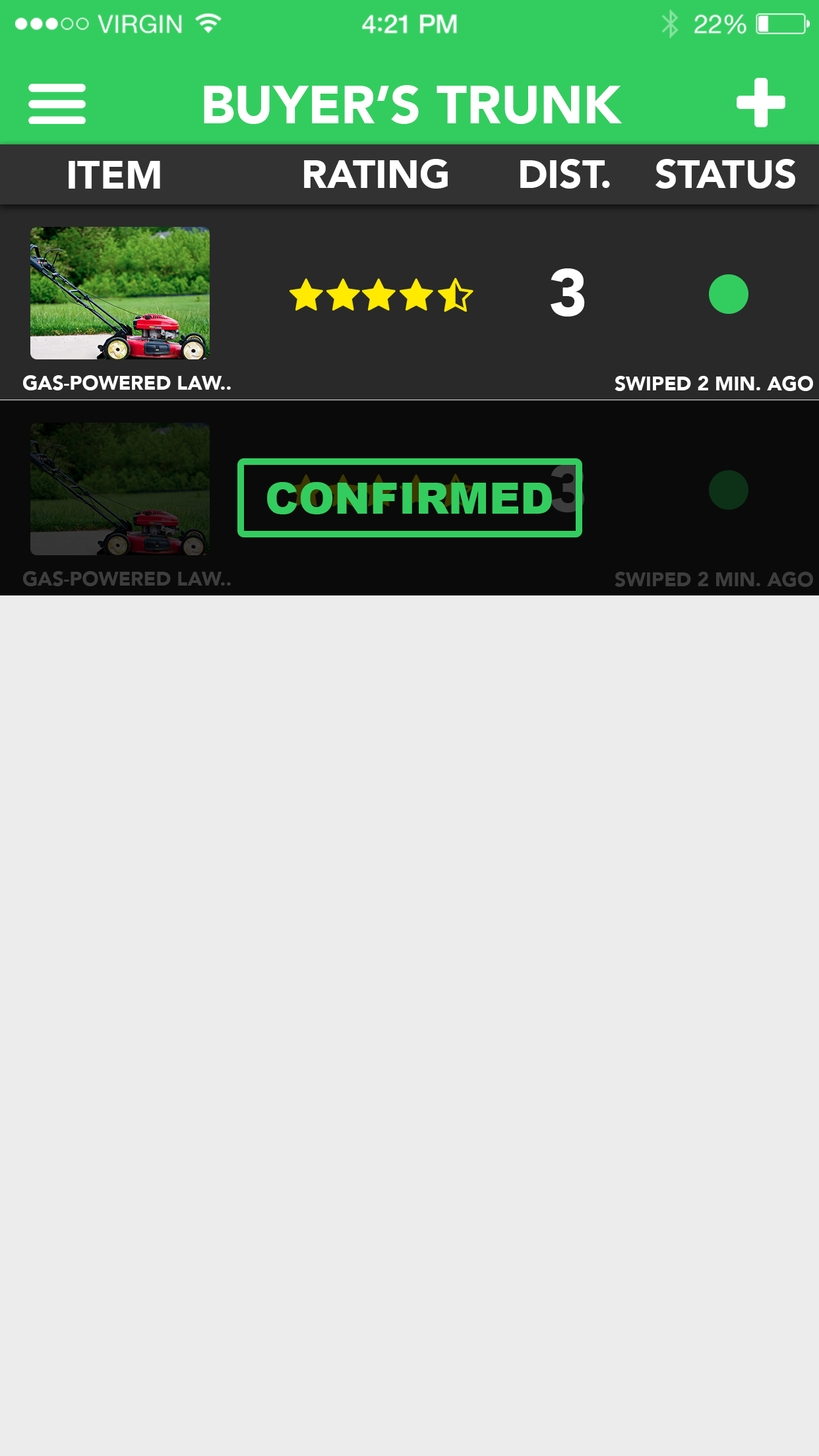
<style>
.page{position:relative;width:819px;height:1456px;background:#ececec}
.page>*{position:absolute;margin:0}
.t1{font:52.8px "Avenir-Black";color:#ffffff}
.t2{font:39.6px "Avenir-Black";color:#ffffff}
.t3{font:19.8px "Avenir-Black";color:#ffffff}
.t4{font:42.9px "Arial-Black";color:#33cd5f}
</style>
<div class="page">
<p class="t1" style="left:204px;top:85px;width:418px;height:39px">BUYER’S TRUNK</p>
<p class="t2" style="left:69px;top:161px;width:91px;height:28px">ITEM</p>
<p class="t2" style="left:304px;top:159px;width:144px;height:30px">RATING</p>
<p class="t2" style="left:520px;top:159px;width:90px;height:30px">DIST.</p>
<p class="t2" style="left:655px;top:159px;width:140px;height:30px">STATUS</p>
<p class="t3" style="left:23px;top:375px;width:208px;height:15px">GAS-POWERED LAW..</p>
<p class="t4" style="left:267px;top:482px;width:285px;height:32px">CONFIRMED</p>
</div>
